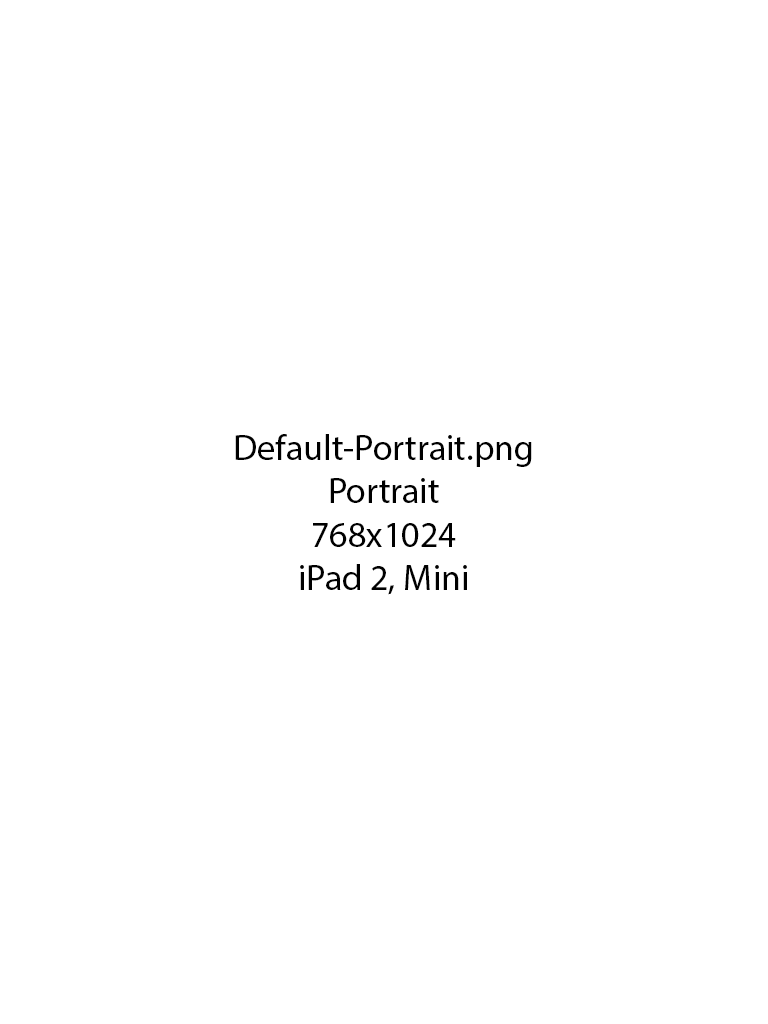
<style>
.page{position:relative;width:768px;height:1024px;background:#ffffff}
.page>*{position:absolute;margin:0}
.t1{font:36px "MyriadPro-Regular";color:#000000}
</style>
<div class="page">
<p class="t1" style="left:235px;top:434px;width:297px;height:161px;text-align:center">Default-Portrait.png<br>Portrait<br>768x1024<br>iPad 2, Mini</p>
</div>
